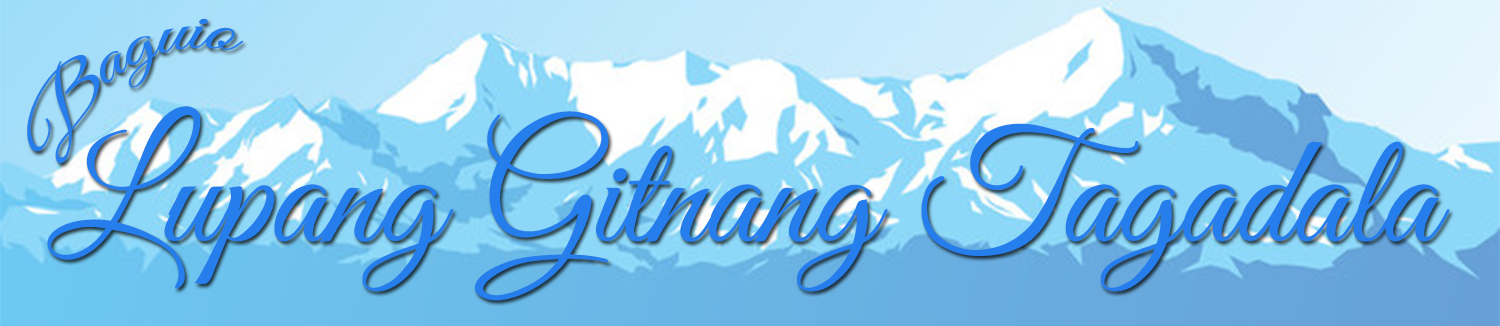
<style>
.page{position:relative;width:1500px;height:326px}
.page>*{position:absolute;margin:0}
.t1{font:62.5px "GreatVibes-Regular";color:#267eec}
.t2{font:158.3px "GreatVibes-Regular";color:#267eec}
</style>
<div class="page">
<p class="t1" style="left:27px;top:18px;width:217px;height:146px;rotate:-32deg">Baguio</p>
<p class="t2" style="left:47px;top:106px;width:1403px;height:195px">Lupang Gitnang Tagadala</p>
</div>
